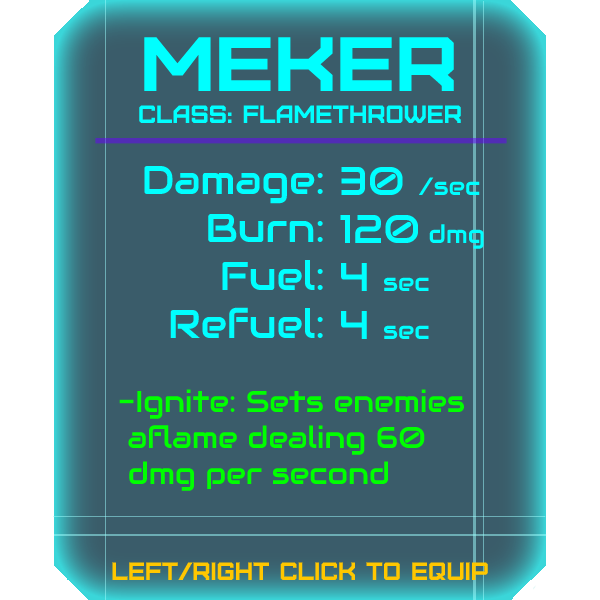
<style>
.page{position:relative;width:600px;height:600px;background:#3a5c6a}
.page>*{position:absolute;margin:0}
.t1{font:76.8px "Furore";color:#00ffff;scale:1.13 1}
.t2{font:25px "Furore";color:#00ffff}
.t3{font:40px "Audiowide-Regular";color:#00ffff}
.t4{font:25px "Audiowide-Regular";color:#00ffff}
.t5{font:30px "Audiowide-Regular";color:#00ff00}
.t6{font:40px "Audiowide-Regular";color:#00ff00}
.t7{font:25px "Furore";color:#ffc700}
</style>
<div class="page">
<p class="t1" style="left:144px;top:37px;width:310px;height:54px">meker</p>
<p class="t2" style="left:139px;top:105px;width:322px;height:18px">Class: flamethrower</p>
<p class="t3" style="left:144px;top:165px;width:179px;height:173px;text-align:right">Damage:<br>Burn:<br>Fuel:<br>Refuel:</p>
<p class="t4" style="left:340px;top:166px;width:144px;height:173px"><span class="t3">30 </span>/sec<br><span class="t3">120 </span>dmg<br><span class="t3">4 </span>sec<br><span class="t3">4 </span>sec</p>
<p class="t5" style="left:119px;top:389px;width:346px;height:102px"><span class="t6"><br><br><br><br><br><br></span>-Ignite: Sets enemies<br> aflame dealing 60<br> dmg per second</p>
<p class="t7" style="left:112px;top:562px;width:376px;height:18px">left/right click to equip</p>
</div>
